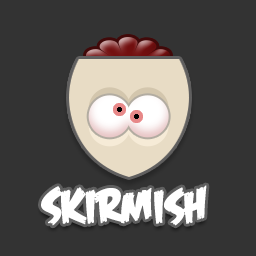
<style>
.page{position:relative;width:256px;height:256px;background:#333333}
.page>*{position:absolute;margin:0}
.t1{font:48px "FeastofFleshBB";color:#ffffff;font-weight:bold}
</style>
<div class="page">
<p class="t1" style="left:41px;top:185px;width:166px;height:41px">Skirmish</p>
</div>
